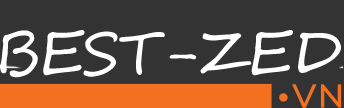
<style>
.page{position:relative;width:344px;height:108px;background:#333333}
.page>*{position:absolute;margin:0}
.t1{font:60px "SegoeScript";letter-spacing:-0.015em;color:#ffffff}
</style>
<div class="page">
<p class="t1" style="left:0px;top:30px;width:341px;height:48px">BEST-ZED</p>
</div>
